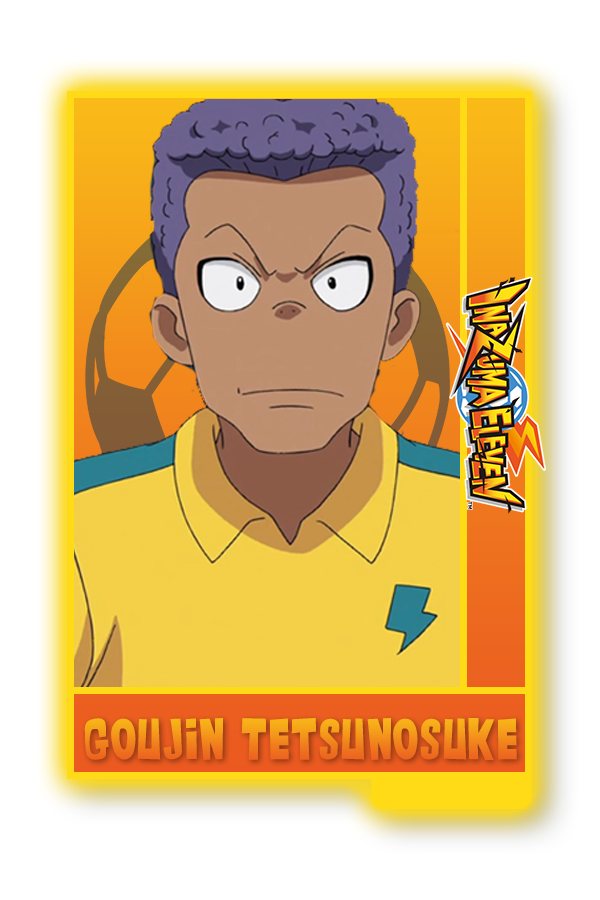
<style>
.page{position:relative;width:600px;height:900px;background:#ffffff}
.page>*{position:absolute;margin:0}
.t1{font:60.3px "TTG-Bold"}
</style>
<div class="page">
<p class="t1" style="left:84px;top:718px;width:433px;height:42px">Goujin Tetsunosuke</p>
</div>
